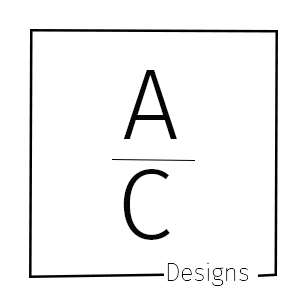
<style>
.page{position:relative;width:304px;height:296px;background:#ffffff}
.page>*{position:absolute;margin:0}
.t1{font:100px "FiraSans-Light";color:#060606}
.t2{font:25px "FiraSans-Thin";color:#060606}
</style>
<div class="page">
<p class="t1" style="left:123px;top:70px;width:54px;height:69px">A</p>
<p class="t1" style="left:123px;top:169px;width:47px;height:71px">C</p>
<p class="t2" style="left:167px;top:262px;width:82px;height:24px">Designs</p>
</div>
